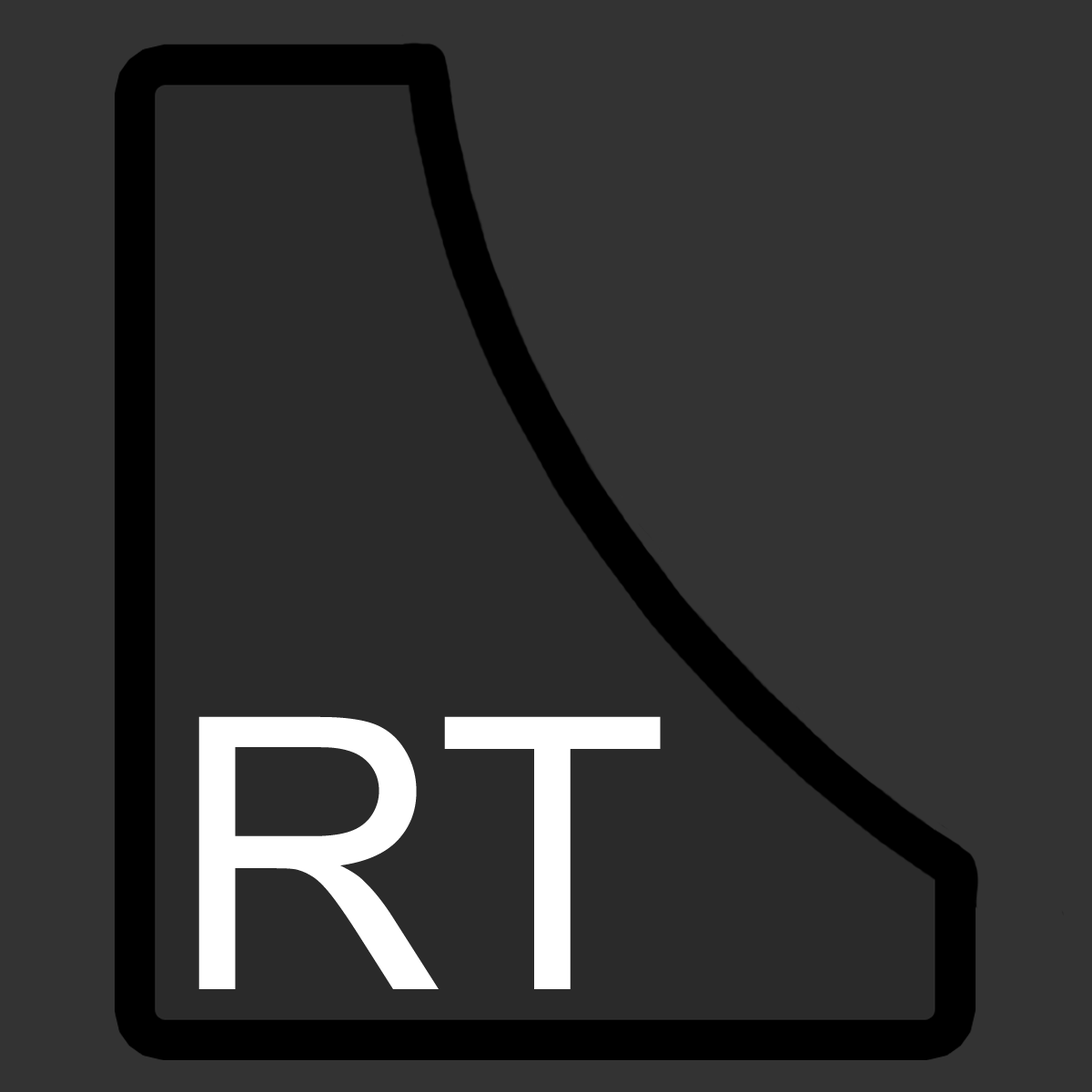
<style>
.page{position:relative;width:1092px;height:1092px;background:#333333}
.page>*{position:absolute;margin:0}
.t1{font:379.2px "ArialMT";color:#ffffff}
</style>
<div class="page">
<p class="t1" style="left:198px;top:716px;width:463px;height:273px">RT</p>
</div>
